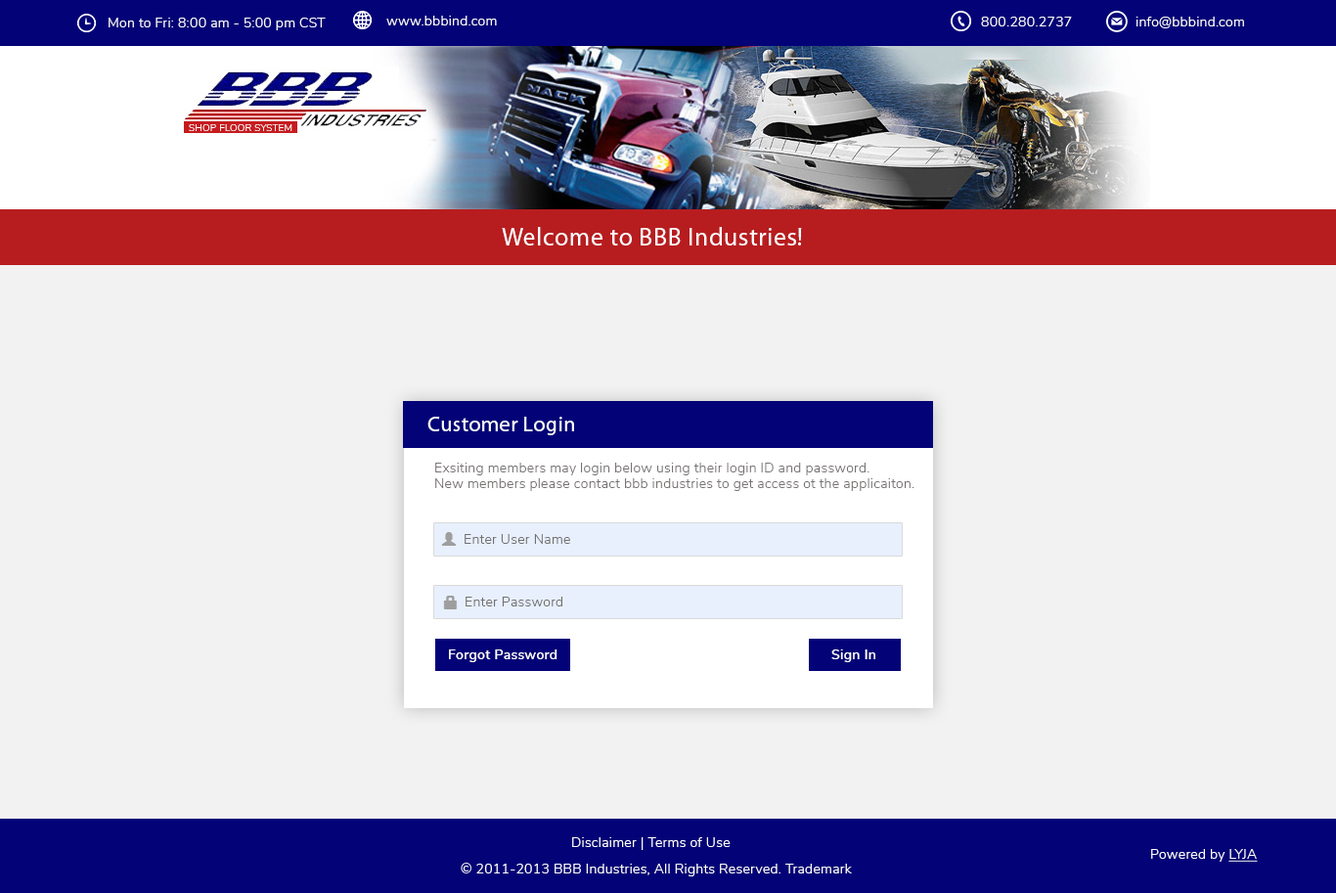
<style>
.page{position:relative;width:1336px;height:893px;background:#f2f2f2}
.page>*{position:absolute;margin:0}
.t1{font:13.7px "NunitoSans-Light";letter-spacing:0.02em;color:#ffffff}
.t2{font:9.8px "NunitoSans-Light";letter-spacing:0.02em;color:#ffffff;text-transform:uppercase}
.t3{font:25.4px "MyriadPro-Regular";letter-spacing:0.02em;color:#ffffff}
.t4{font:21.5px "MyriadPro-Regular";letter-spacing:0.02em;color:#ffffff}
.t5{font:13.7px/15.6px "NunitoSans-Light";letter-spacing:0.02em;color:#777373}
.t6{font:13.7px "NunitoSans-Light";letter-spacing:0.02em;color:#726f6f}
.t7{font:13.7px "NunitoSans-SemiBold";letter-spacing:0.02em;color:#ffffff}
.t8{font:13.7px "NunitoSans-Light";letter-spacing:0.02em;color:#ffffff;text-decoration:underline}
</style>
<div class="page">
<p class="t1" style="left:109px;top:18px;width:217px;height:12px">Mon to Fri: 8:00 am - 5:00 pm CST</p>
<p class="t1" style="left:386px;top:16px;width:111px;height:9px">www.bbbind.com</p>
<p class="t1" style="left:981px;top:17px;width:91px;height:9px">800.280.2737</p>
<p class="t1" style="left:1135px;top:17px;width:109px;height:11px">info@bbbind.com</p>
<p class="t2" style="left:189px;top:124px;width:103px;height:7px">shop floor System</p>
<p class="t3" style="left:502px;top:227px;width:300px;height:18px">Welcome to BBB Industries!</p>
<p class="t4" style="left:427px;top:417px;width:147px;height:18px">Customer Login</p>
<p class="t5" style="left:435px;top:463px;width:479px;height:28px">Exsiting members may login below using their login ID and password. <br>New members please contact bbb industries to get access ot the applicaiton.</p>
<p class="t6" style="left:464px;top:534px;width:106px;height:10px">Enter User Name</p>
<p class="t6" style="left:465px;top:596px;width:97px;height:10px">Enter Password</p>
<p class="t7" style="left:449px;top:649px;width:108px;height:13px">Forgot Password</p>
<p class="t7" style="left:831px;top:649px;width:44px;height:13px">Sign In</p>
<p class="t1" style="left:572px;top:837px;width:158px;height:13px">Disclaimer | Terms of Use</p>
<p class="t1" style="left:1151px;top:849px;width:106px;height:12px">Powered by <span class="t8">LYJA</span></p>
<p class="t1" style="left:461px;top:862px;width:391px;height:14px">© 2011-2013 BBB Industries, All Rights Reserved. Trademark</p>
</div>
